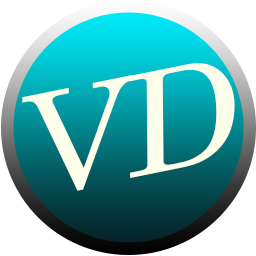
<style>
.page{position:relative;width:256px;height:256px;background:#ffffff}
.page>*{position:absolute;margin:0}
.t1{font:140.9px "Century";letter-spacing:-0.06em;color:#ffffea;scale:1.1 1}
</style>
<div class="page">
<p class="t1" style="left:22px;top:63px;width:213px;height:128px;rotate:-11deg">VD</p>
</div>
